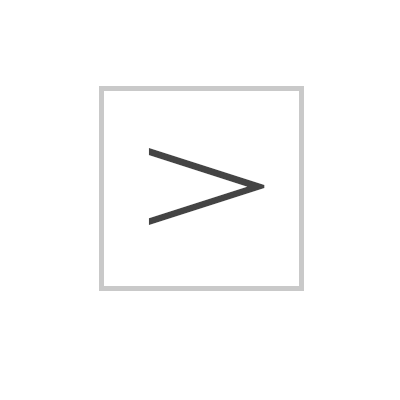
<style>
.page{position:relative;width:400px;height:400px;background:#ffffff}
.page>*{position:absolute;margin:0}
.t1{font:158.7px "TimesNewRomanPSMT";color:#444444;scale:1.38 1}
</style>
<div class="page">
<p class="t1" style="left:148px;top:148px;width:117px;height:77px">&gt;</p>
</div>
